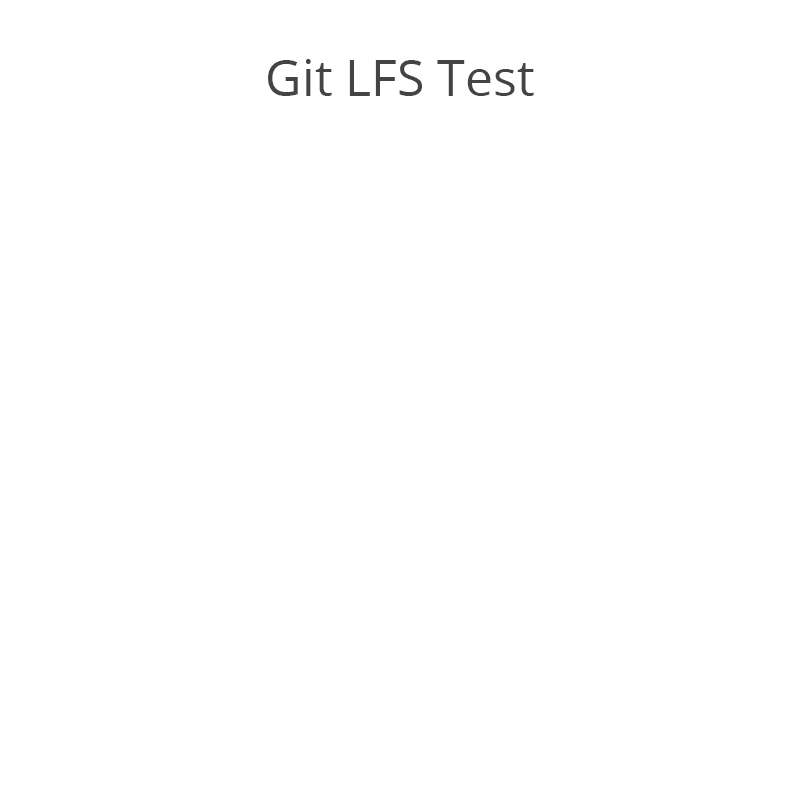
<style>
.page{position:relative;width:800px;height:800px;background:#ffffff}
.page>*{position:absolute;margin:0}
.t1{font:50px "OpenSans";color:#444444}
</style>
<div class="page">
<p class="t1" style="left:268px;top:59px;width:266px;height:37px">Git LFS Test</p>
</div>
